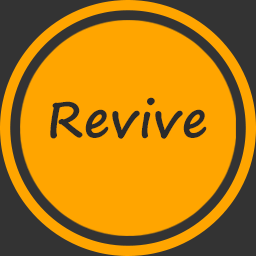
<style>
.page{position:relative;width:256px;height:256px;background:#ffa500}
.page>*{position:absolute;margin:0}
.t1{font:49.4px "SegoePrint-Bold";letter-spacing:0.025em;color:#2b2b2b}
</style>
<div class="page">
<p class="t1" style="left:50px;top:97px;width:157px;height:42px">Revive</p>
</div>
